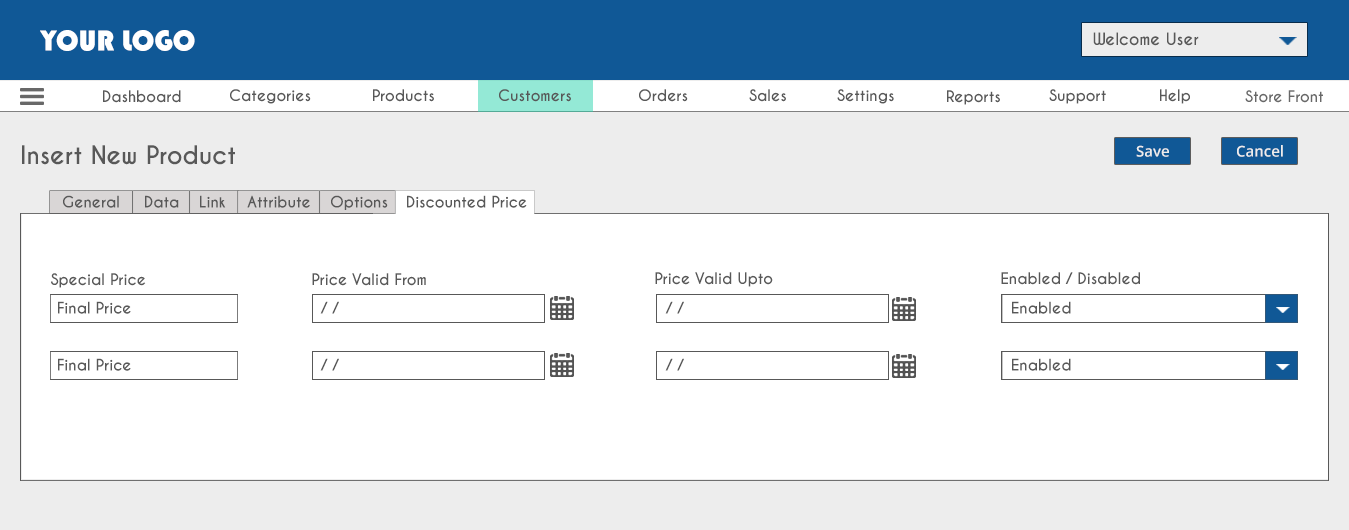
<style>
.page{position:relative;width:1349px;height:530px;background:#ffffff}
.page>*{position:absolute;margin:0}
.t1{font:30px "Bauhaus93";color:#ffffff}
.t2{font:16px "CaviarDreams-Bold";color:#585858}
.t3{font:15px "CaviarDreams-Bold";color:#585858}
.t4{font:15px "CaviarDreams-Bold";color:#686868}
.t5{font:24px "CaviarDreams-Bold";color:#585858}
.t6{font:15px "OpenSans-Semibold";color:#ededed}
</style>
<div class="page">
<p class="t1" style="left:40px;top:30px;width:155px;height:21px">YOUR LOGO</p>
<p class="t2" style="left:1093px;top:32px;width:106px;height:14px">Welcome User</p>
<p class="t3" style="left:230px;top:89px;width:81px;height:15px">Categories</p>
<p class="t3" style="left:373px;top:89px;width:61px;height:13px">Products</p>
<p class="t3" style="left:499px;top:89px;width:72px;height:13px">Customers</p>
<p class="t3" style="left:639px;top:89px;width:49px;height:13px">Orders</p>
<p class="t3" style="left:749px;top:89px;width:37px;height:13px">Sales</p>
<p class="t3" style="left:837px;top:89px;width:57px;height:15px">Settings</p>
<p class="t3" style="left:1049px;top:89px;width:57px;height:15px">Support</p>
<p class="t3" style="left:1160px;top:89px;width:30px;height:15px">Help</p>
<p class="t3" style="left:103px;top:90px;width:78px;height:13px">Dashboard</p>
<p class="t3" style="left:947px;top:90px;width:53px;height:15px">Reports</p>
<p class="t4" style="left:1245px;top:90px;width:78px;height:13px">Store Front</p>
<p class="t5" style="left:22px;top:145px;width:213px;height:20px">Insert New Product</p>
<p class="t6" style="left:1136px;top:145px;width:33px;height:12px">Save</p>
<p class="t6" style="left:1237px;top:145px;width:46px;height:12px">Cancel</p>
<p class="t3" style="left:63px;top:195px;width:56px;height:13px">General</p>
<p class="t3" style="left:145px;top:195px;width:34px;height:13px">Data</p>
<p class="t3" style="left:200px;top:195px;width:26px;height:13px">Link</p>
<p class="t3" style="left:247px;top:195px;width:63px;height:13px">Attribute</p>
<p class="t3" style="left:331px;top:195px;width:57px;height:15px">Options</p>
<p class="t3" style="left:407px;top:195px;width:120px;height:13px">Discounted Price</p>
<p class="t3" style="left:51px;top:273px;width:95px;height:15px">Special Price</p>
<p class="t3" style="left:312px;top:273px;width:114px;height:13px">Price Valid From</p>
<p class="t3" style="left:655px;top:272px;width:118px;height:15px">Price Valid Upto</p>
<p class="t3" style="left:1001px;top:272px;width:139px;height:13px">Enabled / Disabled</p>
<p class="t3" style="left:58px;top:301px;width:73px;height:13px">Final Price</p>
<p class="t3" style="left:320px;top:301px;width:19px;height:13px">/ /</p>
<p class="t3" style="left:665px;top:301px;width:19px;height:13px">/ /</p>
<p class="t3" style="left:1012px;top:301px;width:59px;height:13px">Enabled</p>
<p class="t3" style="left:58px;top:358px;width:73px;height:13px">Final Price</p>
<p class="t3" style="left:320px;top:358px;width:19px;height:13px">/ /</p>
<p class="t3" style="left:665px;top:358px;width:19px;height:13px">/ /</p>
<p class="t3" style="left:1012px;top:358px;width:59px;height:13px">Enabled</p>
</div>
